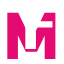
<style>
.page{position:relative;width:64px;height:64px;background:#ffffff}
.page>*{position:absolute;margin:0}
.t1{font:96px "Dhurjati";color:#ffffff}
.t2{font:95.9px "Dhurjati";color:#e50a71}
</style>
<div class="page">
<p class="t1" style="left:25px;top:2px;width:32px;height:47px">F</p>
<p class="t2" style="left:7px;top:12px;width:49px;height:47px">M</p>
</div>
